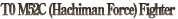
<style>
.page{position:relative;width:178px;height:19px;background:#ffffff}
.page>*{position:absolute;margin:0}
.t1{font:16px "RyuminPro-ExBold";letter-spacing:-0.12em;color:#4a3f32;font-weight:bold;scale:0.78 1}
</style>
<div class="page">
<p class="t1" style="left:0px;top:2px;width:176px;height:17px">T0 M52C (Hachiman Force) Fighter</p>
</div>
